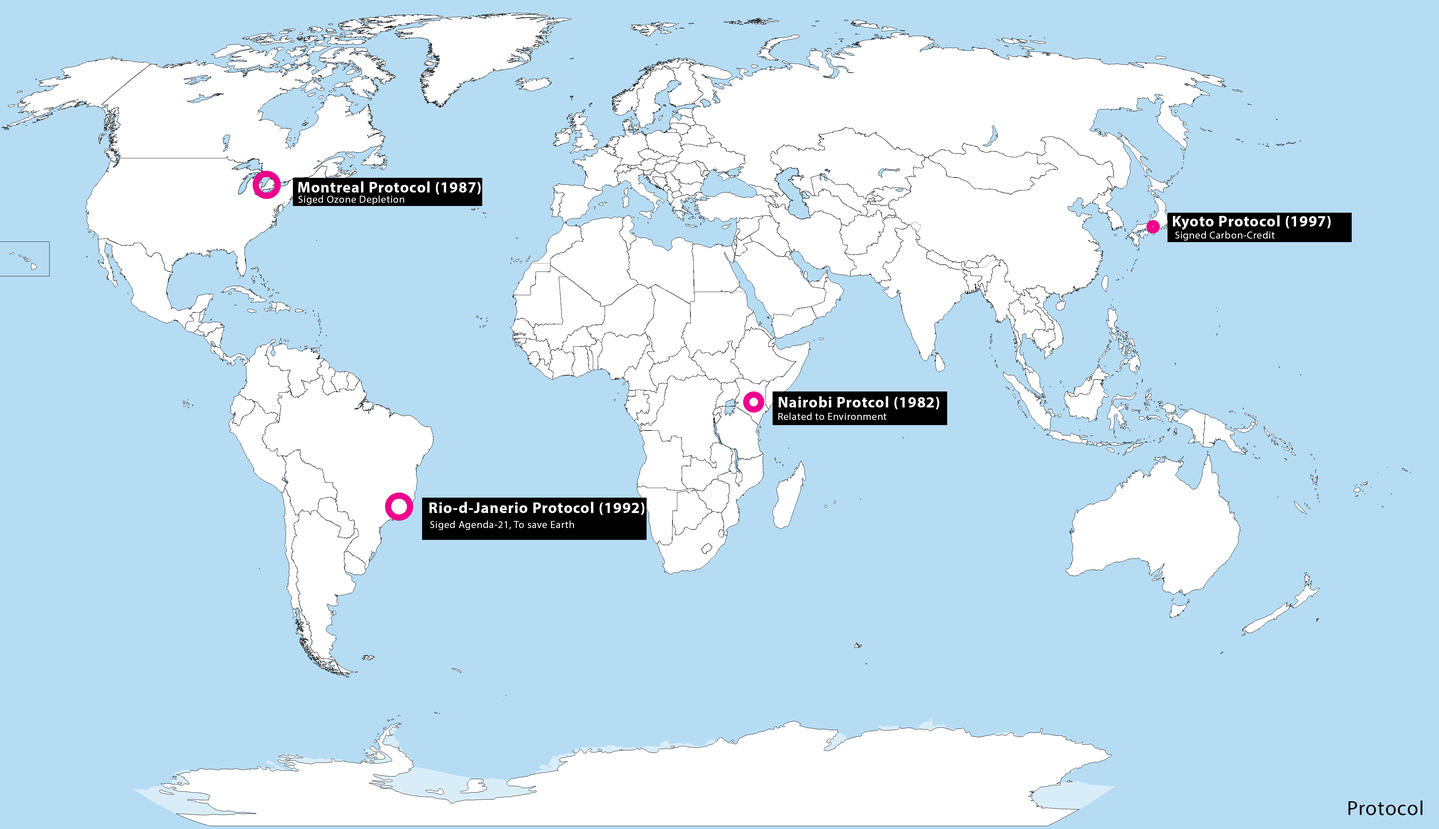
<style>
.page{position:relative;width:1439px;height:829px;background:#b6dcf4}
.page>*{position:absolute;margin:0}
.t1{font:15.3px "MyriadPro-Bold";letter-spacing:0.04em;color:#ffffff}
.t2{font:10.2px "MyriadPro-Regular";letter-spacing:0.04em;color:#ffffff}
.t3{font:20.5px "MyriadPro-Regular";letter-spacing:0.04em;color:#000000}
</style>
<div class="page">
<p class="t1" style="left:298px;top:181px;width:183px;height:13px">Montreal Protocol (1987)</p>
<p class="t2" style="left:298px;top:195px;width:106px;height:10px">Siged Ozone Depletion</p>
<p class="t1" style="left:1173px;top:215px;width:157px;height:15px">Kyoto Protocol (1997)</p>
<p class="t2" style="left:1175px;top:231px;width:99px;height:9px">Signed Carbon-Credit</p>
<p class="t1" style="left:779px;top:396px;width:160px;height:13px">Nairobi Protcol (1982)</p>
<p class="t2" style="left:778px;top:412px;width:108px;height:8px">Related to Environment</p>
<p class="t1" style="left:429px;top:502px;width:215px;height:13px">Rio-d-Janerio Protocol (1992)</p>
<p class="t2" style="left:430px;top:521px;width:144px;height:9px">Siged Agenda-21, To save Earth</p>
<p class="t3" style="left:1348px;top:800px;width:74px;height:15px">Protocol</p>
</div>
